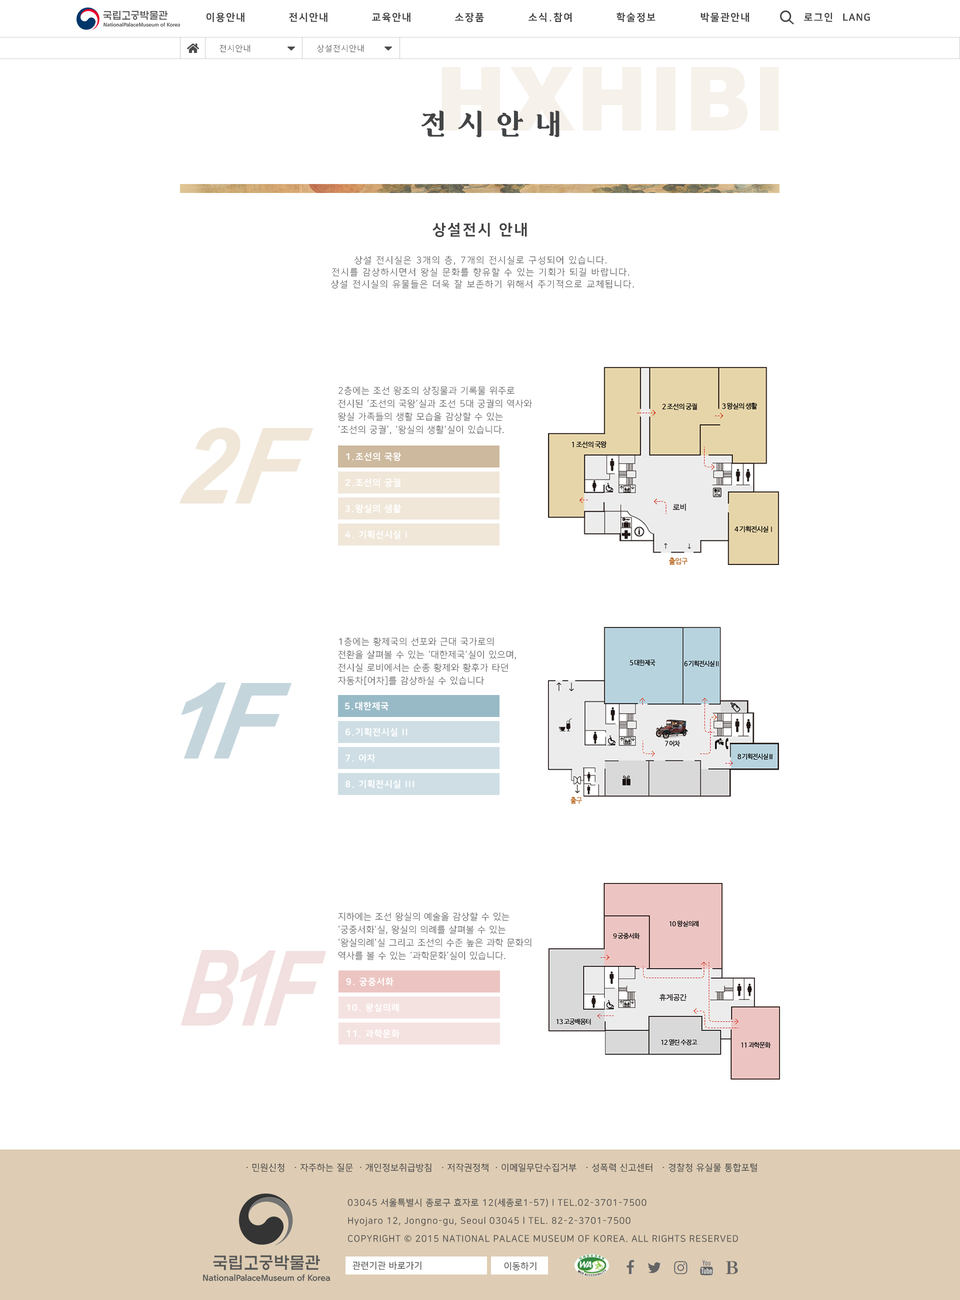
<style>
.page{position:relative;width:960px;height:1300px;background:#ffffff}
.page>*{position:absolute;margin:0}
.t1{font:10px "NanumSquare_acEB";letter-spacing:0.15em;color:#434446}
.t2{font:10px "NanumSquare_acEB";letter-spacing:0.05em;color:#434446}
.t3{font:8px "NanumSquare_acL";letter-spacing:0.15em;color:#434446}
.t4{font:27.5px "MuseumClassicBold";letter-spacing:0.4em;color:#434446}
.t5{font:15px "NanumSquare_acEB";letter-spacing:0.15em;color:#434446}
.t6{font:9px/12px "NanumSquare_acL";letter-spacing:0.15em;color:#434446}
.t7{font:9px/13px "NanumSquare_acL";letter-spacing:0.1em;color:#434446}
.t8{font:105px "Arial-BoldItalicMT";letter-spacing:0.025em;color:#f0e7d9;font-style:italic;scale:0.95 1}
.t9{font:9px "NanumSquare_acEB";letter-spacing:0.1em;color:#ffffff}
.t10{font:105px "Arial-BoldItalicMT";letter-spacing:-0.075em;color:#c5d5dc;font-style:italic;scale:0.95 1}
.t11{font:9px/13px "NanumSquare_acL";letter-spacing:0.09em;color:#434446}
.t12{font:104px "Arial-BoldItalicMT";letter-spacing:-0.1em;color:#f1e0df;font-style:italic;scale:0.77 1}
.t13{font:105px "Arial-BoldItalicMT";letter-spacing:-0.1em;color:#f1e0df;font-style:italic;scale:0.71 1}
.t14{font:9px "NanumSquare_acR";letter-spacing:0.075em;color:#434446}
.t15{font:9px/18px "NanumSquare_acR";letter-spacing:0.075em;color:#434446}
</style>
<div class="page">
<p class="t1" style="left:206px;top:12px;width:38px;height:10px">이용안내</p>
<p class="t1" style="left:289px;top:12px;width:38px;height:10px">전시안내</p>
<p class="t1" style="left:372px;top:12px;width:38px;height:10px">교육안내</p>
<p class="t1" style="left:455px;top:12px;width:29px;height:10px">소장품</p>
<p class="t1" style="left:528px;top:12px;width:44px;height:10px">소식.참여</p>
<p class="t1" style="left:616px;top:12px;width:39px;height:10px">학술정보</p>
<p class="t1" style="left:700px;top:12px;width:49px;height:10px">박물관안내</p>
<p class="t1" style="left:804px;top:12px;width:28px;height:10px">로그인</p>
<p class="t2" style="left:843px;top:13px;width:27px;height:8px">LANG</p>
<p class="t3" style="left:219px;top:44px;width:31px;height:8px">전시안내</p>
<p class="t3" style="left:317px;top:44px;width:47px;height:8px">상설전시안내</p>
<p class="t4" style="left:421px;top:110px;width:138px;height:27px">전시안내</p>
<p class="t5" style="left:432px;top:222px;width:95px;height:15px">상설전시 안내</p>
<p class="t6" style="left:331px;top:255px;width:303px;height:33px;text-align:center">상설 전시실은 3개의 층, 7개의 전시실로 구성되어 있습니다. <br>전시를 감상하시면서 왕실 문화를 향유할 수 있는 기회가 되길 바랍니다. <br>상설 전시실의 유물들은 더욱 잘 보존하기 위해서 주기적으로 교체됩니다.</p>
<p class="t7" style="left:338px;top:386px;width:194px;height:48px">2층에는 조선 왕조의 상징물과 기록물 위주로 <br>전시된 ‘조선의 국왕’실과 조선 5대 궁궐의 역사와<br>왕실 가족들의 생활 모습을 감상할 수 있는<br>‘조선의 궁궐’, ‘왕실의 생활’실이 있습니다.</p>
<p class="t8" style="left:179px;top:427px;width:134px;height:76px">2F</p>
<p class="t9" style="left:346px;top:452px;width:55px;height:9px">1.조선의 국왕</p>
<p class="t9" style="left:345px;top:478px;width:55px;height:9px">2.조선의 궁궐</p>
<p class="t9" style="left:345px;top:504px;width:56px;height:9px">3.왕실의 생활</p>
<p class="t9" style="left:345px;top:530px;width:62px;height:9px">4. 기획선시실 I</p>
<p class="t7" style="left:338px;top:637px;width:178px;height:48px">1층에는 황제국의 선포와 근대 국가로의 <br>전환을 살펴볼 수 있는 ‘대한제국’실이 있으며,  <br>전시실 로비에서는 순종 황제와 황후가 타던 <br>자동차[어차]를 감상하실 수 있습니다</p>
<p class="t10" style="left:181px;top:682px;width:111px;height:76px">1F</p>
<p class="t9" style="left:344px;top:701px;width:44px;height:9px">5.대한제국</p>
<p class="t9" style="left:345px;top:727px;width:62px;height:9px">6.기획전시실 II</p>
<p class="t9" style="left:345px;top:753px;width:30px;height:9px">7. 어차</p>
<p class="t9" style="left:345px;top:779px;width:69px;height:9px">8. 기획전시실 III</p>
<p class="t11" style="left:338px;top:912px;width:193px;height:48px">지하에는 조선 왕실의 예술을 감상할 수 있는 <br>‘궁중서화’실, 왕실의 의례를 살펴볼 수 있는 <br>‘왕실의례’실 그리고 조선의 수준 높은 과학 문화의 <br>역사를 볼 수 있는 ‘과학문화’실이 있습니다.</p>
<p class="t12" style="left:180px;top:950px;width:146px;height:75px"><span class="t13">B</span>1F</p>
<p class="t9" style="left:346px;top:977px;width:47px;height:9px">9. 궁중서화</p>
<p class="t9" style="left:346px;top:1003px;width:53px;height:9px">10. 왕실의례</p>
<p class="t9" style="left:346px;top:1029px;width:53px;height:9px">11. 과학문화</p>
<p class="t14" style="left:246px;top:1163px;width:511px;height:9px">ㆍ민원신청  ㆍ자주하는 질문 ㆍ개인정보취급방침  ㆍ저작권정책 ㆍ이메일무단수집거부  ㆍ성폭력 신고센터  ㆍ경찰청 유실물 통합포털</p>
<p class="t15" style="left:347px;top:1198px;width:391px;height:44px">03045 서울특별시 종로구 효자로 12(세종로1-57) l TEL.02-3701-7500<br>Hyojaro 12, Jongno-gu, Seoul 03045 l TEL. 82-2-3701-7500<br>COPYRIGHT © 2015 NATIONAL PALACE MUSEUM OF KOREA. ALL RIGHTS RESERVED</p>
<p class="t14" style="left:352px;top:1261px;width:69px;height:9px">관련기관 바로가기</p>
<p class="t14" style="left:504px;top:1261px;width:32px;height:10px">이동하기</p>
</div>
